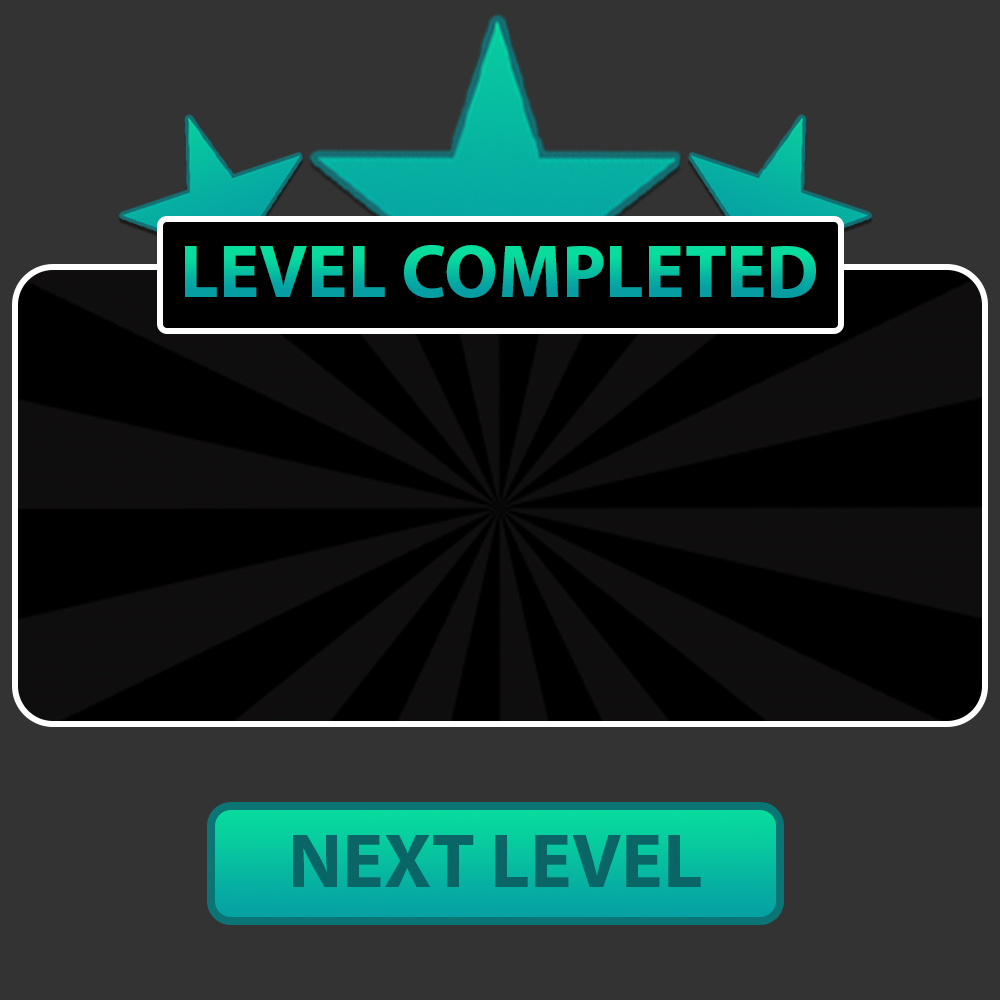
<style>
.page{position:relative;width:1000px;height:1000px;background:#333333}
.page>*{position:absolute;margin:0}
.t1{font:75.4px "MyriadPro-Bold"}
.t2{font:77.8px "MyriadPro-Bold";color:#0a6666}
</style>
<div class="page">
<p class="t1" style="left:185px;top:245px;width:631px;height:53px">LEVEL COMPLETED</p>
<p class="t2" style="left:293px;top:835px;width:408px;height:52px">NEXT LEVEL</p>
</div>
